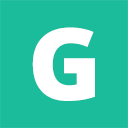
<style>
.page{position:relative;width:128px;height:128px;background:#1abc9c}
.page>*{position:absolute;margin:0}
.t1{font:100px "OpenSans-Extrabold";color:#ffffff}
</style>
<div class="page">
<p class="t1" style="left:32px;top:27px;width:63px;height:74px">G</p>
</div>
